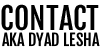
<style>
.page{position:relative;width:100px;height:50px;background:#ffffff}
.page>*{position:absolute;margin:0}
.t1{font:30px "FjallaOne-Regular";color:#000000}
.t2{font:16px "FjallaOne-Regular";color:#000000}
</style>
<div class="page">
<p class="t1" style="left:1px;top:4px;width:98px;height:27px">contact</p>
<p class="t2" style="left:2px;top:32px;width:98px;height:15px">aka dyad lesha</p>
</div>
